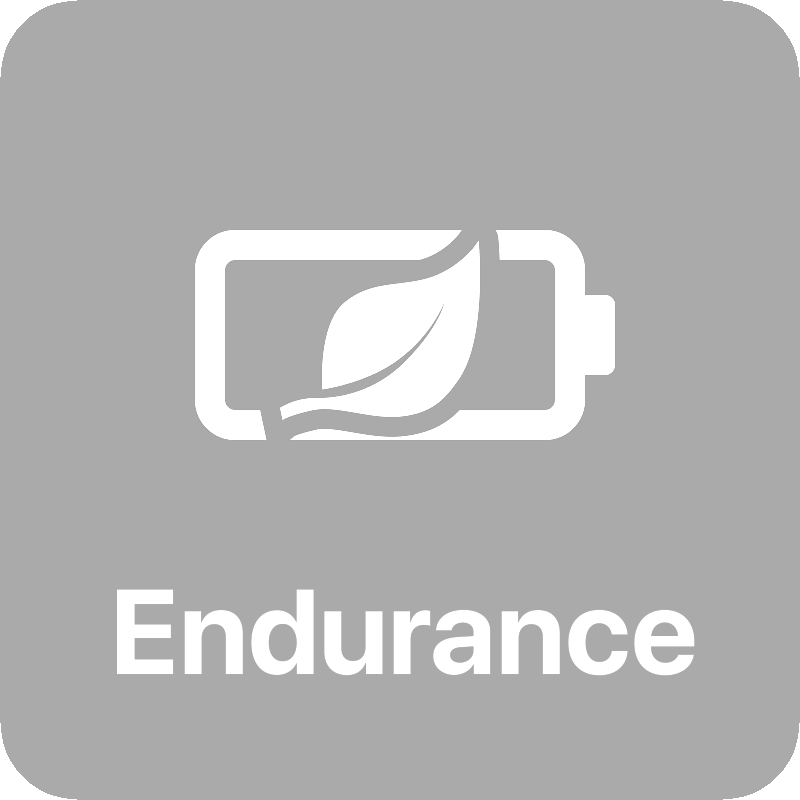
<style>
.page{position:relative;width:800px;height:800px;background:#aaaaaa}
.page>*{position:absolute;margin:0}
.t1{font:120px "SFProDisplay-Bold";color:#ffffff}
</style>
<div class="page">
<p class="t1" style="left:117px;top:589px;width:578px;height:87px">Endurance</p>
<p class="t1" style="left:117px;top:589px;width:578px;height:87px">Endurance</p>
</div>
